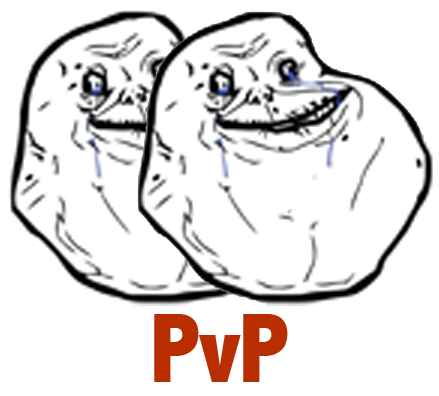
<style>
.page{position:relative;width:439px;height:396px;background:#ffffff}
.page>*{position:absolute;margin:0}
.t1{font:99.8px "AbadiMT-CondensedExtraBold";color:#b82e00}
</style>
<div class="page">
<p class="t1" style="left:154px;top:314px;width:134px;height:68px">PvP</p>
</div>
